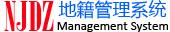
<style>
.page{position:relative;width:170px;height:32px;background:#ffffff}
.page>*{position:absolute;margin:0}
.t1{font:40px "BodoniMTPosterCompressed";color:#fe0012}
.t2{font:18px "MicrosoftYaHei";color:#005ffd}
.t3{font:13px "Calibri";color:#000000}
</style>
<div class="page">
<p class="t1" style="left:4px;top:1px;width:50px;height:30px">NJDZ</p>
<p class="t2" style="left:58px;top:0px;width:109px;height:19px">地籍管理系统</p>
<p class="t3" style="left:57px;top:22px;width:111px;height:10px">Management System</p>
</div>
